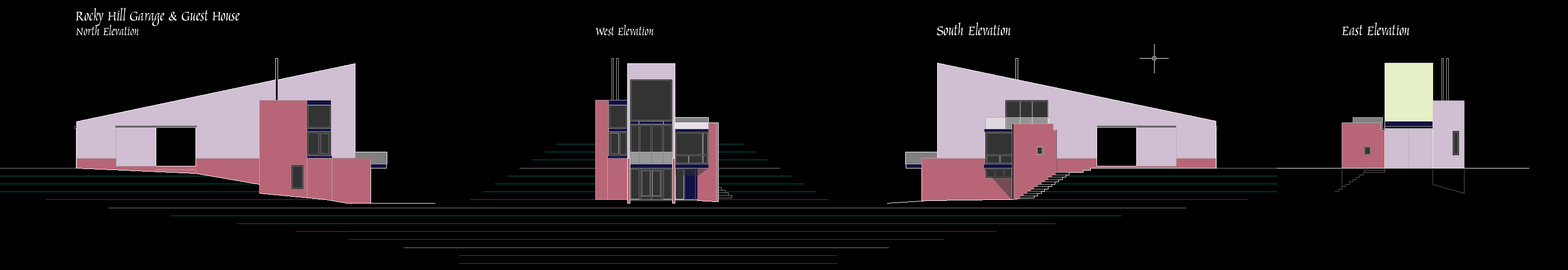
<style>
.page{position:relative;width:1568px;height:270px;background:#000000}
.page>*{position:absolute;margin:0}
.t1{font:18.8px "Marigold";color:#ffffff}
.t2{font:15.7px "Marigold";color:#ffffff}
</style>
<div class="page">
<p class="t1" style="left:76px;top:8px;width:164px;height:18px">Rocky Hill Garage &amp; Guest House</p>
<p class="t2" style="left:76px;top:25px;width:63px;height:11px">North Elevation</p>
<p class="t2" style="left:595px;top:25px;width:59px;height:11px">West Elevation</p>
<p class="t1" style="left:937px;top:22px;width:74px;height:14px">South Elevation</p>
<p class="t1" style="left:1342px;top:22px;width:68px;height:14px">East Elevation</p>
</div>
